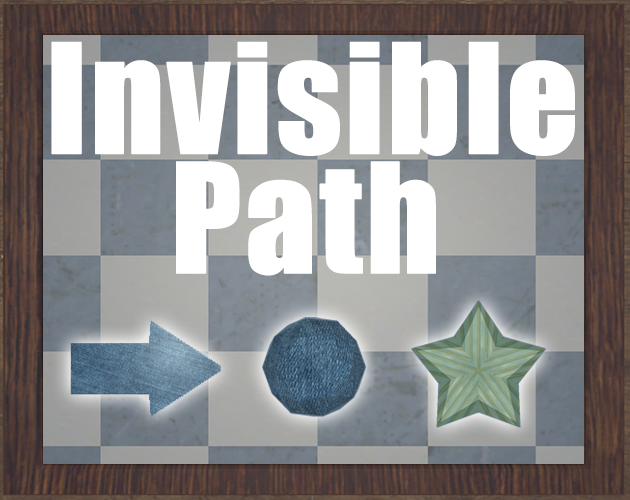
<style>
.page{position:relative;width:630px;height:500px}
.page>*{position:absolute;margin:0}
.t1{font:140.6px "Impact";color:#ffffff;font-weight:bold}
</style>
<div class="page">
<p class="t1" style="left:51px;top:41px;width:524px;height:115px">Invisible</p>
<p class="t1" style="left:176px;top:161px;width:260px;height:115px">Path</p>
</div>
